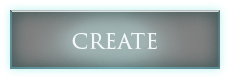
<style>
.page{position:relative;width:230px;height:79px}
.page>*{position:absolute;margin:0}
.t1{font:24px "TrajanPro3-Regular";color:#f1f1f1}
</style>
<div class="page">
<p class="t1" style="left:72px;top:32px;width:85px;height:17px">create</p>
</div>
